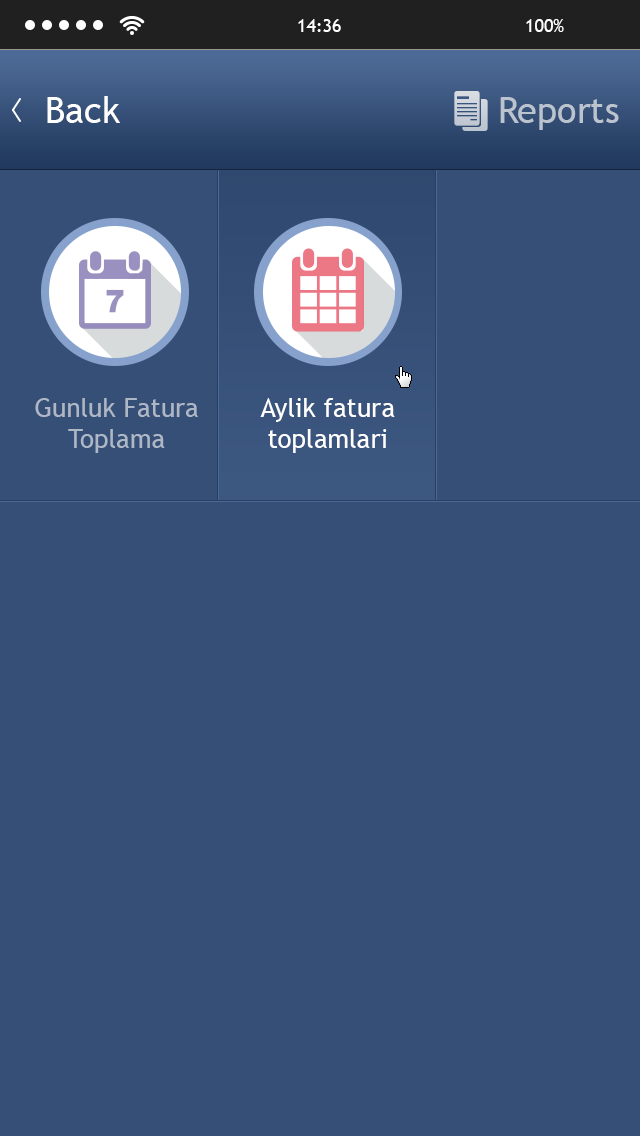
<style>
.page{position:relative;width:640px;height:1136px;background:#354f77}
.page>*{position:absolute;margin:0}
.t1{font:36px "TrebuchetMS";color:#ffffff}
.t2{font:36px "TrebuchetMS";color:#bbc3ce}
.t3{font:26px "TrebuchetMS";color:#aeb7c5}
.t4{font:26px "TrebuchetMS";color:#ffffff}
</style>
<div class="page">
<p class="t1" style="left:47px;top:96px;width:73px;height:27px">Back</p>
<p class="t2" style="left:500px;top:97px;width:119px;height:33px">Reports</p>
<p class="t3" style="left:35px;top:398px;width:163px;height:55px;text-align:center">Gunluk Fatura Toplama</p>
<p class="t4" style="left:260px;top:398px;width:135px;height:55px;text-align:center">Aylik fatura toplamlari</p>
</div>
